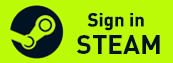
<style>
.page{position:relative;width:173px;height:63px;background:#bcfb08}
.page>*{position:absolute;margin:0}
.t1{font:18.7px "DINPro-Bold";color:#001322}
.t2{font:26.7px "DINPro-Bold";color:#001322}
</style>
<div class="page">
<p class="t1" style="left:87px;top:13px;width:57px;height:18px">Sign in</p>
<p class="t2" style="left:76px;top:35px;width:84px;height:19px">STEAM</p>
</div>
